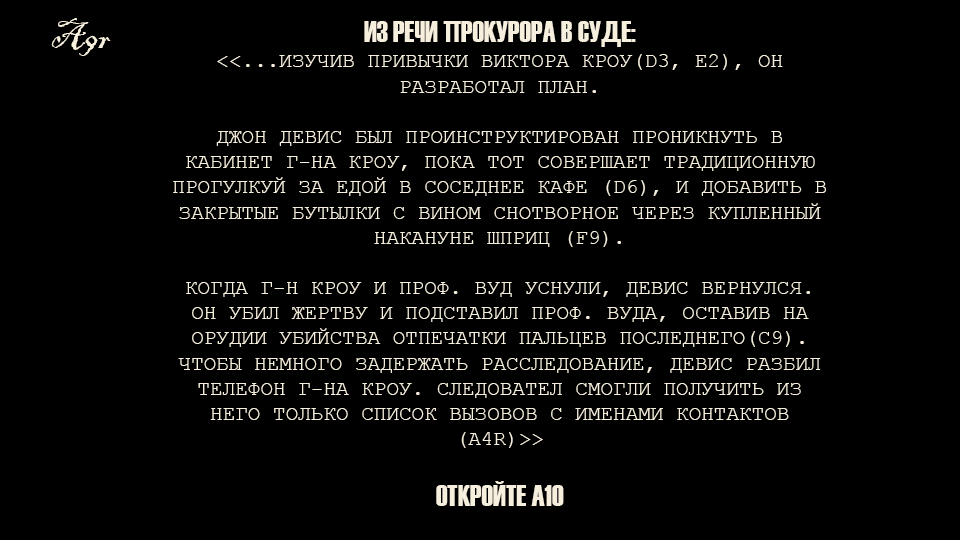
<style>
.page{position:relative;width:960px;height:540px;background:#000000}
.page>*{position:absolute;margin:0}
.t1{font:38.8px "BlackadderITC-Regular";color:#f9f1de}
.t2{font:21px "CourierNewPSMT";color:#f7efdd;text-transform:uppercase}
.t3{font:30.1px "Haettenschweiler";color:#f7efdd;text-transform:uppercase}
</style>
<div class="page">
<p class="t1" style="left:51px;top:18px;width:60px;height:38px">A9r</p>
<p class="t2" style="left:173px;top:21px;width:653px;height:485px;text-align:center"><span class="t3">Из речи прокурора в суде:<br></span>&lt;&lt;...Изучив привычки Виктора Кроу(D3, E2), он разработал план.<br><br>Джон Девис был проинструктирован проникнуть в кабинет г-на Кроу, пока тот совершает традиционную прогулкуй за едой в соседнее кафе (D6), и добавить в закрытые бутылки с вином снотворное через купленный накануне шприц (F9).<br><br>Когда г-н Кроу и проф. Вуд уснули, Девис вернулся. Он убил жертву и подставил проф. Вуда, оставив на орудии убийства отпечатки пальцев последнего(C9). Чтобы немного задержать расследование, Девис разбил телефон г-на Кроу. Следовател смогли получить из него только список вызовов с именами контактов (A4r)&gt;&gt;  <br><br><span class="t3">Откройте A10</span></p>
</div>
